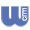
<style>
.page{position:relative;width:30px;height:30px;background:#ffffff}
.page>*{position:absolute;margin:0}
.t1{font:8.2px "ArialMT";color:#ffffff}
</style>
<div class="page">
<p class="t1" style="left:22px;top:8px;width:5px;height:13px;rotate:-90deg">crm</p>
</div>
